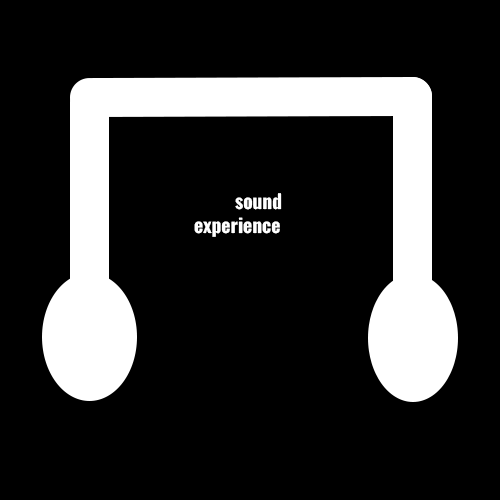
<style>
.page{position:relative;width:500px;height:500px;background:#000000}
.page>*{position:absolute;margin:0}
.t1{font:19.4px "Oswald-Bold";color:#ffffff}
.t2{font:58.3px "Oswald-Bold";color:#ffffff}
</style>
<div class="page">
<p class="t1" style="left:194px;top:193px;width:88px;height:44px"><span class="t2"> </span> sound <br>experience</p>
</div>
